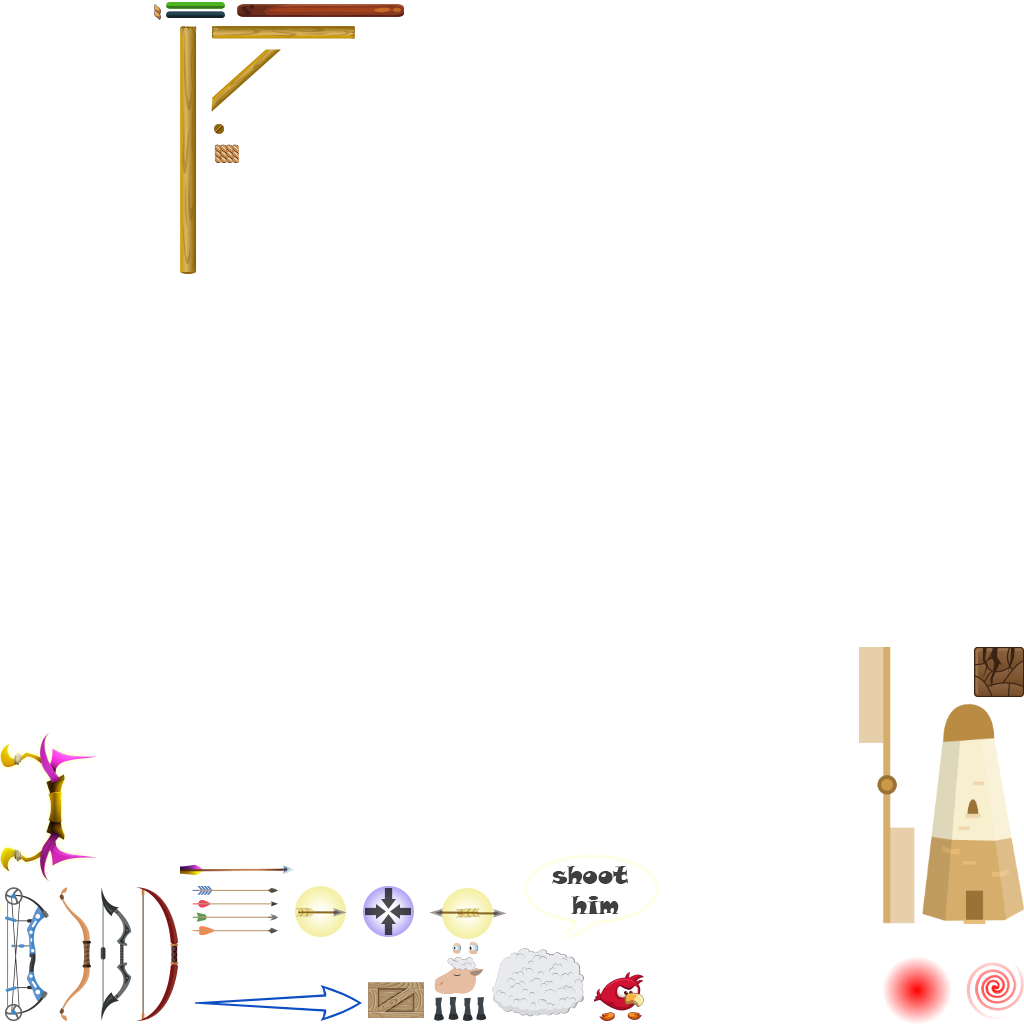
<style>
.page{position:relative;width:1024px;height:1024px;background:#ffffff}
.page>*{position:absolute;margin:0}
.t1{font:25px "SnapITC-Regular";color:#403f3e}
</style>
<div class="page">
<p class="t1" style="left:551px;top:866px;width:78px;height:48px;text-align:center">shoot <br>him</p>
</div>
